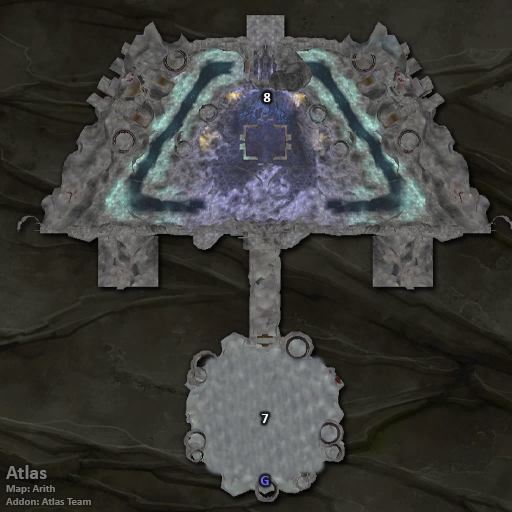
<style>
.page{position:relative;width:512px;height:512px}
.page>*{position:absolute;margin:0}
.t1{font:14px "Calibri-Bold";color:#ffffff}
.t2{font:11px "Calibri-Bold";color:#7d7c7a}
.t3{font:20px "Calibri-Bold";color:#7d7c7a}
.t4{font:14px "Calibri-Bold";color:#6666ff}
</style>
<div class="page">
<p class="t1" style="left:263px;top:93px;width:8px;height:9px">8</p>
<p class="t1" style="left:261px;top:414px;width:8px;height:9px">7</p>
<p class="t2" style="left:6px;top:465px;width:85px;height:40px"><span class="t3">Atlas<br></span>Map: Arith<br>Addon: Atlas Team</p>
<p class="t4" style="left:260px;top:476px;width:9px;height:9px">G</p>
</div>
